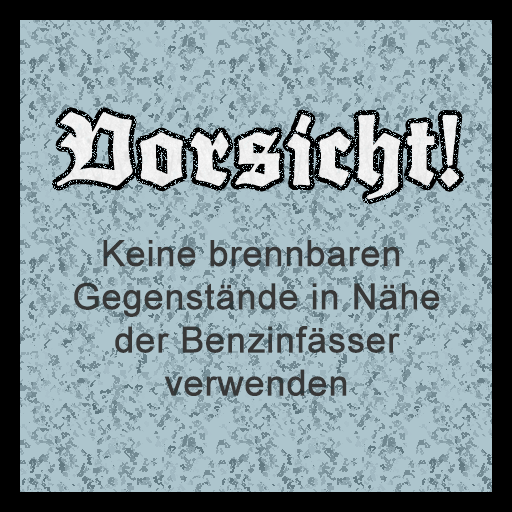
<style>
.page{position:relative;width:512px;height:512px;background:#adc5cd}
.page>*{position:absolute;margin:0}
.t1{font:90px "FetteTrump-Deutsch";color:#ffffff;font-weight:bold}
.t2{font:36px "ArialMT";color:#383838;font-weight:bold}
</style>
<div class="page">
<p class="t1" style="left:57px;top:112px;width:402px;height:88px">Vorsicht!</p>
<p class="t2" style="left:74px;top:240px;width:365px;height:156px;text-align:center">Keine brennbaren <br>Gegenstände in Nähe<br>der Benzinfässer<br>verwenden</p>
</div>
